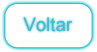
<style>
.page{position:relative;width:97px;height:52px;background:#ffffff}
.page>*{position:absolute;margin:0}
.t1{font:18.7px "ArialMT";color:#39bcd8}
</style>
<div class="page">
<p class="t1" style="left:23px;top:17px;width:50px;height:15px">Voltar</p>
</div>
